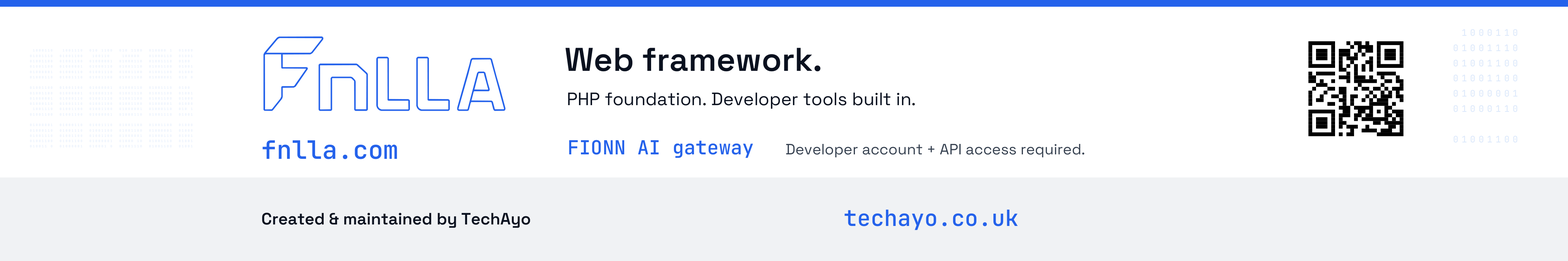
<style>
.page{position:relative;width:1568px;height:261px;background:#ffffff}
.page>*{position:absolute;margin:0}
.t1{font:32.9px "SpaceGrotesk-SemiBold";color:#0b1220}
.t2{font:17.9px "SpaceGrotesk-Regular";color:#0b1220}
.t3{font:25.4px "JetBrainsMono-SemiBold";color:#2563eb}
.t4{font:19.4px "JetBrainsMono-SemiBold";color:#2563eb}
.t5{font:14.9px "SpaceGrotesk-Regular";color:#374151}
.t6{font:16.4px "SpaceGrotesk-SemiBold";color:#0b1220}
.t7{font:22.4px "JetBrainsMono-SemiBold";color:#2563eb}
</style>
<div class="page">
<p class="t1" style="left:564px;top:38px;width:259px;height:43px">Web framework.</p>
<p class="t2" style="left:566px;top:87px;width:351px;height:25px">PHP foundation. Developer tools built in.</p>
<p class="t3" style="left:261px;top:132px;width:138px;height:36px">fnlla.com</p>
<p class="t4" style="left:567px;top:134px;width:188px;height:27px">FIONN AI gateway</p>
<p class="t5" style="left:785px;top:139px;width:301px;height:21px">Developer account + API access required.</p>
<p class="t6" style="left:261px;top:208px;width:271px;height:22px">Created &amp; maintained by TechAyo</p>
<p class="t7" style="left:843px;top:202px;width:176px;height:32px">techayo.co.uk</p>
</div>
